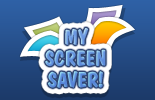
<style>
.page{position:relative;width:155px;height:100px}
.page>*{position:absolute;margin:0}
.t1{font:21.4px/21.4px "DomBoldBT-Regular";color:#608edc;text-transform:uppercase}
</style>
<div class="page">
<p class="t1" style="left:45px;top:28px;width:61px;height:60px;text-align:center">My<br>screen<br>Saver!</p>
</div>
